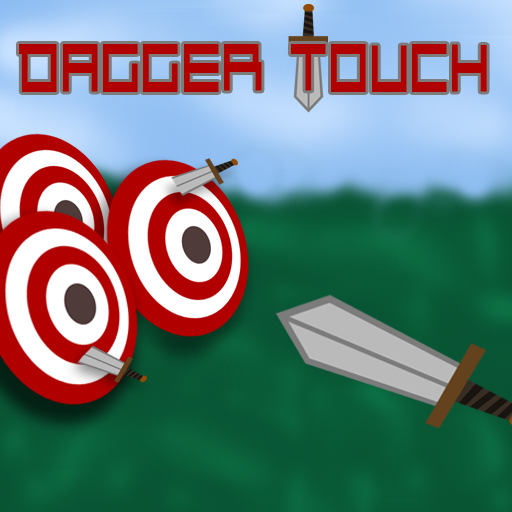
<style>
.page{position:relative;width:512px;height:512px}
.page>*{position:absolute;margin:0}
.t1{font:97.8px "Kunstware-Alphabet";color:#b10000;scale:0.49 1}
</style>
<div class="page">
<p class="t1" style="left:19px;top:44px;width:468px;height:48px">DAGGER TOUCH</p>
</div>
